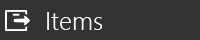
<style>
.page{position:relative;width:200px;height:40px;background:#333333}
.page>*{position:absolute;margin:0}
.t1{font:25px "SegoeUI-Semilight";color:#ffffff}
</style>
<div class="page">
<p class="t1" style="left:47px;top:12px;width:56px;height:18px">Items</p>
</div>
